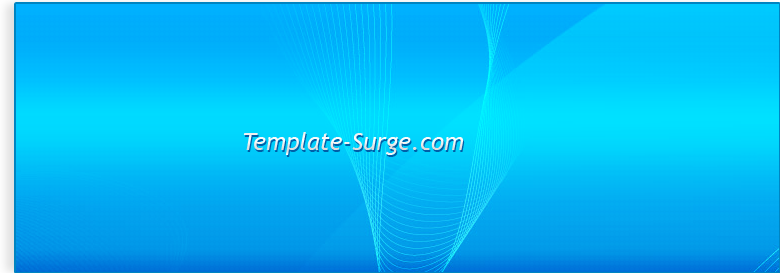
<style>
.page{position:relative;width:780px;height:273px}
.page>*{position:absolute;margin:0}
.t1{font:24px "TrebuchetMS-Italic";color:#ffffff}
.t2{font:24px "TrebuchetMS-Italic"}
</style>
<div class="page">
<p class="t1" style="left:243px;top:132px;width:221px;height:23px">Template-Surge.com</p>
<p class="t2" style="left:244px;top:134px;width:221px;height:23px">Template-Surge.com</p>
</div>
